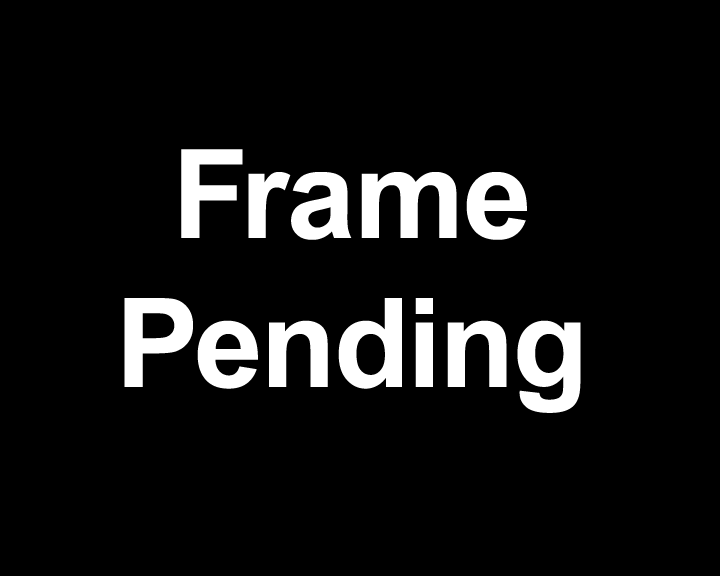
<style>
.page{position:relative;width:720px;height:576px;background:#000000}
.page>*{position:absolute;margin:0}
.t1{font:124px "Arial-BoldMT";color:#ffffff}
</style>
<div class="page">
<p class="t1" style="left:124px;top:149px;width:457px;height:264px;text-align:center">Frame<br>Pending</p>
</div>
